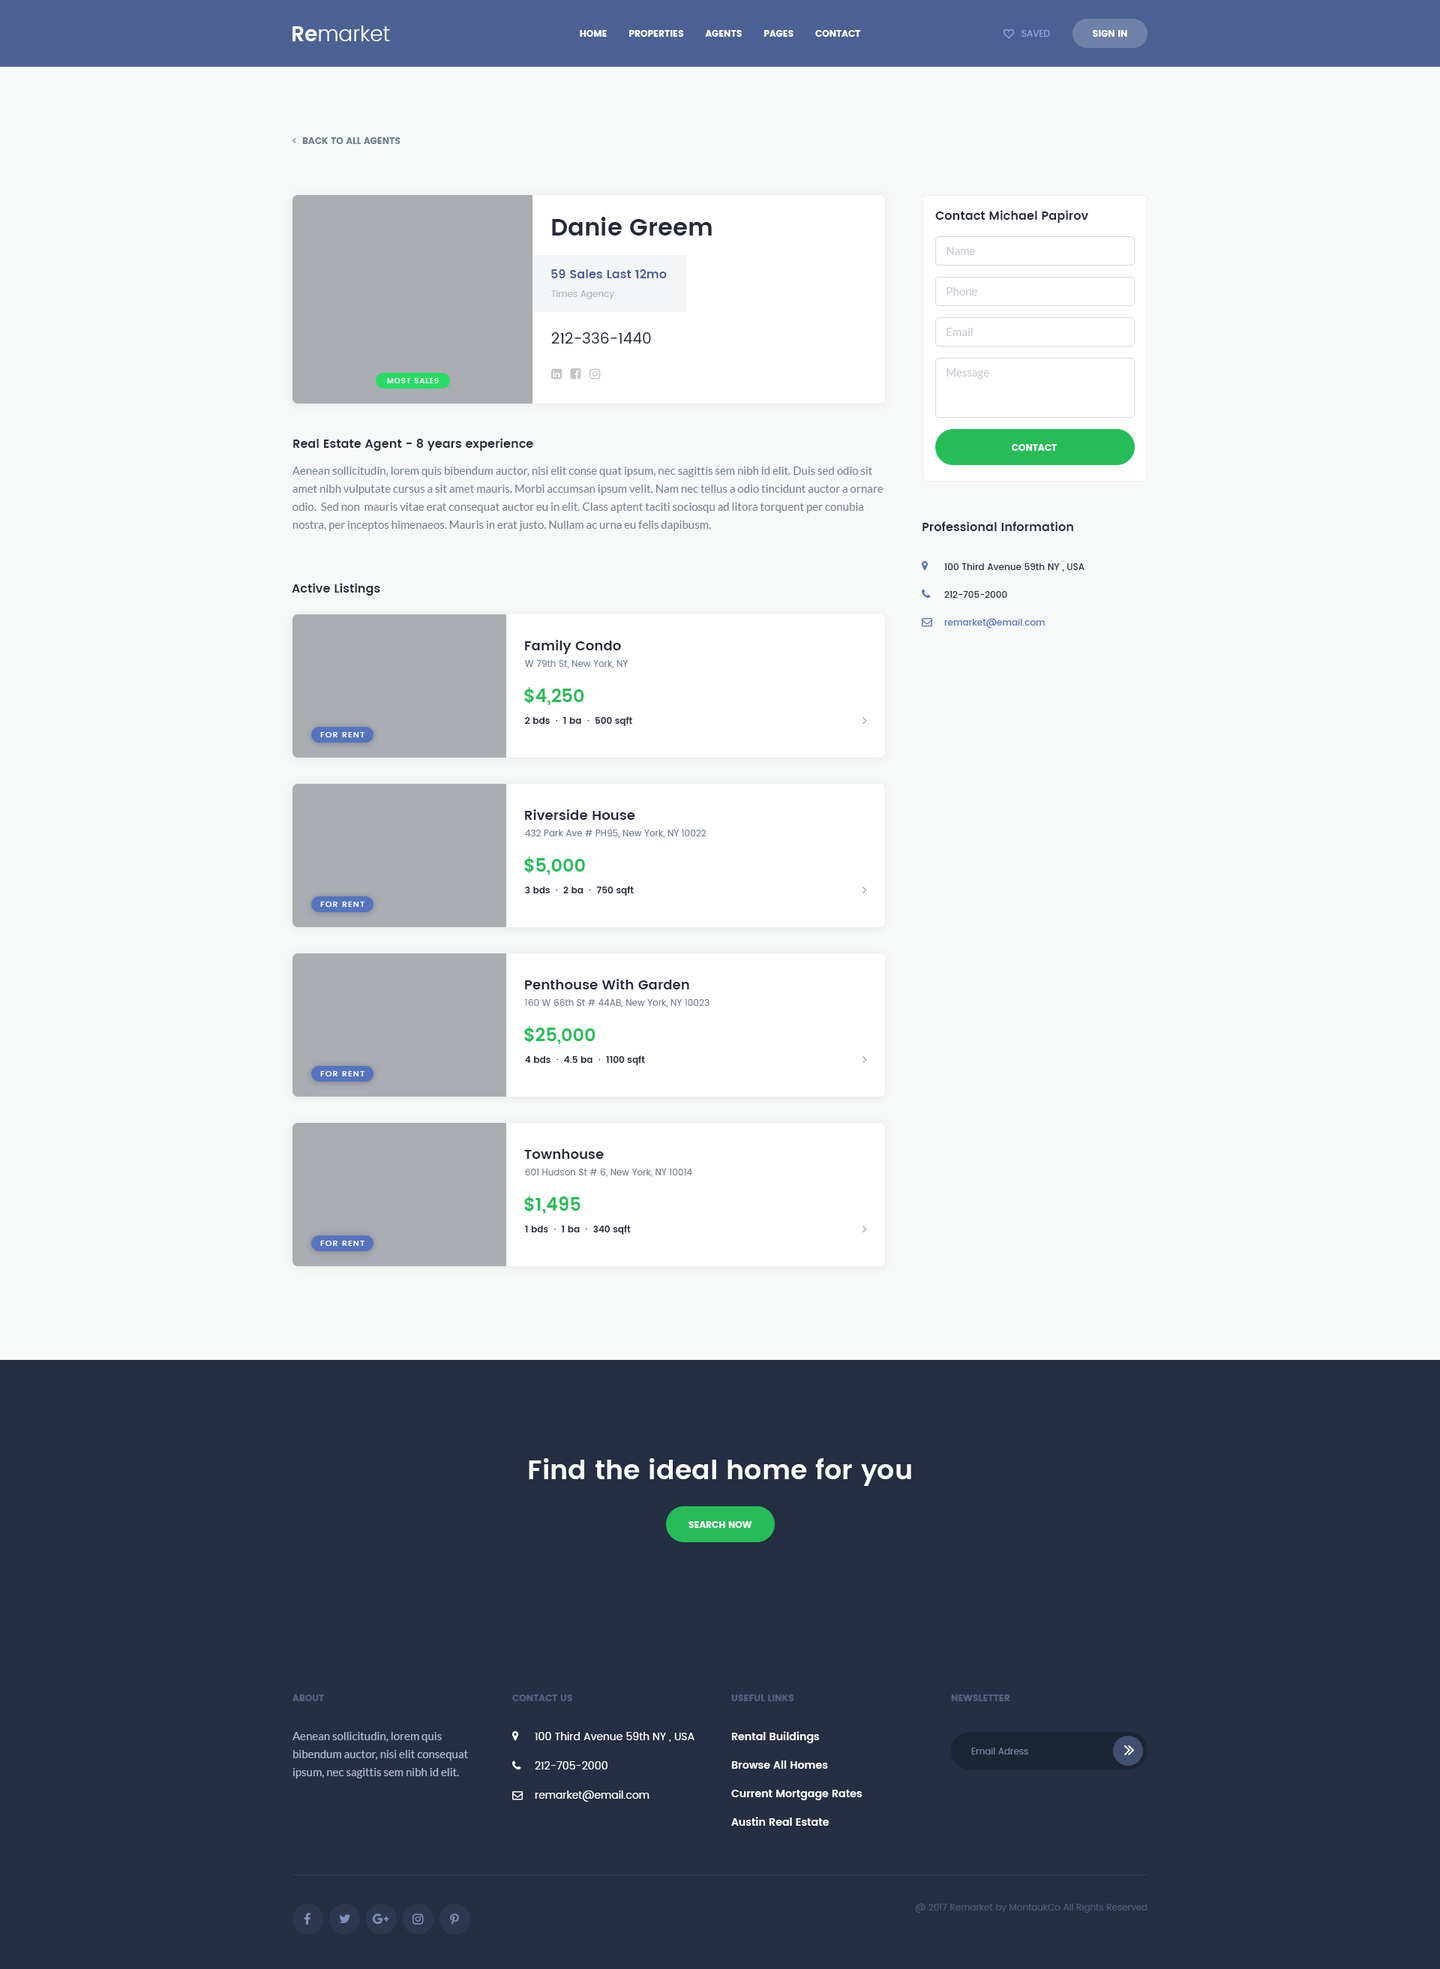
<style>
.page{position:relative;width:1440px;height:1969px;background:#f7f8f8}
.page>*{position:absolute;margin:0}
.t1{font:21px "Poppins-Light";color:#ffffff}
.t2{font:21px "Poppins-SemiBold";color:#ffffff}
.t3{font:9px "Poppins";color:#ffffff;text-transform:uppercase}
.t4{font:9px "Poppins-Regular";color:#93ace2;text-transform:uppercase}
.t5{font:9px "Poppins";color:#727f90;text-transform:uppercase}
.t6{font:24px "Poppins-SemiBold";color:#242a3a}
.t7{font:12px "Poppins-SemiBold";color:#242a3a}
.t8{font:11.2px "Lato-Regular";color:#c3c7cc}
.t9{font:12px "Poppins-SemiBold";color:#4c6193}
.t10{font:9px "Poppins-Regular";color:#afb4bb}
.t11{font:15px "Poppins-Regular";color:#242a3a}
.t12{font:7.5px "Poppins-Medium";letter-spacing:0.1em;color:#ffffff;text-transform:uppercase}
.t13{font:11.2px/18px "Lato-Regular";color:#727f90}
.t14{font:9px "Poppins-Medium";color:#242a3a}
.t15{font:9px "Poppins-Medium";color:#5574bf}
.t16{font:13.5px "Poppins-SemiBold";color:#242a3a}
.t17{font:9px "Poppins-Regular";color:#727f90}
.t18{font:18px "Poppins-SemiBold";color:#26bc58}
.t19{font:9px "Poppins-SemiBold";color:#242a3a}
.t20{font:8.2px "Poppins-Medium";letter-spacing:0.1em;color:#ffffff;text-transform:uppercase}
.t21{font:27px "Poppins-SemiBold";color:#ffffff}
.t22{font:9px "Poppins";color:#536282;text-transform:uppercase}
.t23{font:11.2px/18px "Lato-Regular";color:#b2bdd5}
.t24{font:10.5px "Poppins-Regular";color:#ffffff}
.t25{font:10.5px/28.5px "Poppins-SemiBold";color:#ffffff}
.t26{font:9px "Poppins-Regular";color:#7784a2}
.t27{font:9px "Poppins-Regular";color:#4d5b7c}
</style>
<div class="page">
<p class="t1" style="left:292px;top:26px;width:98px;height:15px"><span class="t2">Re</span>market</p>
<p class="t3" style="left:580px;top:30px;width:281px;height:7px">Home        Properties        Agents        Pages        Contact</p>
<p class="t4" style="left:1022px;top:30px;width:28px;height:7px">Saved</p>
<p class="t3" style="left:1093px;top:30px;width:34px;height:7px">Sign In</p>
<p class="t5" style="left:302px;top:137px;width:98px;height:7px">Back to all agents</p>
<p class="t6" style="left:552px;top:217px;width:160px;height:19px">Danie Greem</p>
<p class="t7" style="left:935px;top:210px;width:153px;height:13px">Contact Michael Papirov</p>
<p class="t8" style="left:946px;top:247px;width:29px;height:8px">Name</p>
<p class="t9" style="left:551px;top:269px;width:116px;height:9px">59 Sales Last 12mo</p>
<p class="t10" style="left:551px;top:290px;width:63px;height:9px">Times Agency</p>
<p class="t8" style="left:946px;top:287px;width:31px;height:9px">Phone</p>
<p class="t8" style="left:946px;top:328px;width:27px;height:8px">Email</p>
<p class="t11" style="left:551px;top:332px;width:100px;height:12px">212-336-1440</p>
<p class="t8" style="left:946px;top:368px;width:43px;height:11px">Message</p>
<p class="t12" style="left:387px;top:378px;width:52px;height:5px">Most Sales</p>
<p class="t7" style="left:293px;top:438px;width:240px;height:13px">Real Estate Agent - 8 years experience</p>
<p class="t3" style="left:1012px;top:444px;width:45px;height:7px">Contact</p>
<p class="t13" style="left:292px;top:466px;width:592px;height:65px">Aenean sollicitudin, lorem quis bibendum auctor, nisi elit conse quat ipsum, nec sagittis sem nibh id elit. Duis sed odio sit amet nibh vulputate cursus a sit amet mauris. Morbi accumsan ipsum velit. Nam nec tellus a odio tincidunt auctor a ornare odio.  Sed non  mauris vitae erat consequat auctor eu in elit. Class aptent taciti sociosqu ad litora torquent per conubia nostra, per inceptos himenaeos. Mauris in erat justo. Nullam ac urna eu felis dapibusm.</p>
<p class="t7" style="left:922px;top:521px;width:151px;height:10px">Professional Information</p>
<p class="t14" style="left:944px;top:563px;width:140px;height:9px">100 Third Avenue 59th NY , USA</p>
<p class="t7" style="left:292px;top:583px;width:88px;height:13px">Active Listings</p>
<p class="t14" style="left:944px;top:591px;width:63px;height:7px">212-705-2000</p>
<p class="t15" style="left:944px;top:618px;width:101px;height:10px">remarket@email.com</p>
<p class="t16" style="left:525px;top:640px;width:96px;height:14px">Family Condo</p>
<p class="t17" style="left:524px;top:660px;width:104px;height:8px">W 79th St, New York, NY</p>
<p class="t18" style="left:524px;top:687px;width:60px;height:18px">$4,250</p>
<p class="t19" style="left:525px;top:716px;width:107px;height:10px">2 bds  ∙  1 ba  ∙  500 sqft</p>
<p class="t20" style="left:320px;top:732px;width:44px;height:5px">For rent</p>
<p class="t16" style="left:525px;top:809px;width:110px;height:11px">Riverside House</p>
<p class="t17" style="left:525px;top:830px;width:181px;height:8px">432 Park Ave # PH95, New York, NY 10022</p>
<p class="t18" style="left:524px;top:856px;width:61px;height:18px">$5,000</p>
<p class="t19" style="left:525px;top:886px;width:109px;height:10px">3 bds  ∙  2 ba  ∙  750 sqft</p>
<p class="t20" style="left:320px;top:902px;width:44px;height:5px">For rent</p>
<p class="t16" style="left:525px;top:979px;width:164px;height:10px">Penthouse With Garden</p>
<p class="t17" style="left:525px;top:999px;width:185px;height:8px">160 W 66th St # 44AB, New York, NY 10023</p>
<p class="t18" style="left:524px;top:1026px;width:72px;height:18px">$25,000</p>
<p class="t19" style="left:525px;top:1055px;width:120px;height:10px">4 bds  ∙  4.5 ba  ∙  1100 sqft</p>
<p class="t20" style="left:320px;top:1071px;width:44px;height:5px">For rent</p>
<p class="t16" style="left:524px;top:1149px;width:80px;height:10px">Townhouse</p>
<p class="t17" style="left:525px;top:1168px;width:167px;height:9px">601 Hudson St # 6, New York, NY 10014</p>
<p class="t18" style="left:524px;top:1196px;width:56px;height:18px">$1,495</p>
<p class="t19" style="left:525px;top:1225px;width:106px;height:9px">1 bds  ∙  1 ba  ∙  340 sqft</p>
<p class="t20" style="left:320px;top:1240px;width:44px;height:6px">For rent</p>
<p class="t21" style="left:529px;top:1458px;width:382px;height:28px">Find the ideal home for you</p>
<p class="t3" style="left:688px;top:1521px;width:64px;height:7px">Search Now</p>
<p class="t22" style="left:292px;top:1694px;width:33px;height:7px">About</p>
<p class="t22" style="left:512px;top:1694px;width:60px;height:7px">Contact Us</p>
<p class="t22" style="left:731px;top:1694px;width:63px;height:7px">Useful Links</p>
<p class="t22" style="left:951px;top:1694px;width:59px;height:7px">Newsletter</p>
<p class="t23" style="left:292px;top:1732px;width:176px;height:46px">Aenean sollicitudin, lorem quis bibendum auctor, nisi elit consequat ipsum, nec sagittis sem nibh id elit.</p>
<p class="t24" style="left:535px;top:1732px;width:159px;height:10px">100 Third Avenue 59th NY , USA</p>
<p class="t25" style="left:731px;top:1731px;width:131px;height:95px">Rental Buildings<br>Browse All Homes<br>Current Mortgage Rates<br>Austin Real Estate</p>
<p class="t26" style="left:971px;top:1748px;width:57px;height:6px">Email Adress</p>
<p class="t24" style="left:535px;top:1761px;width:73px;height:8px">212-705-2000</p>
<p class="t24" style="left:535px;top:1790px;width:115px;height:12px">remarket@email.com</p>
<p class="t27" style="left:915px;top:1903px;width:233px;height:10px">@ 2017 Remarket by MontaukCo All Rights Reserved</p>
</div>
